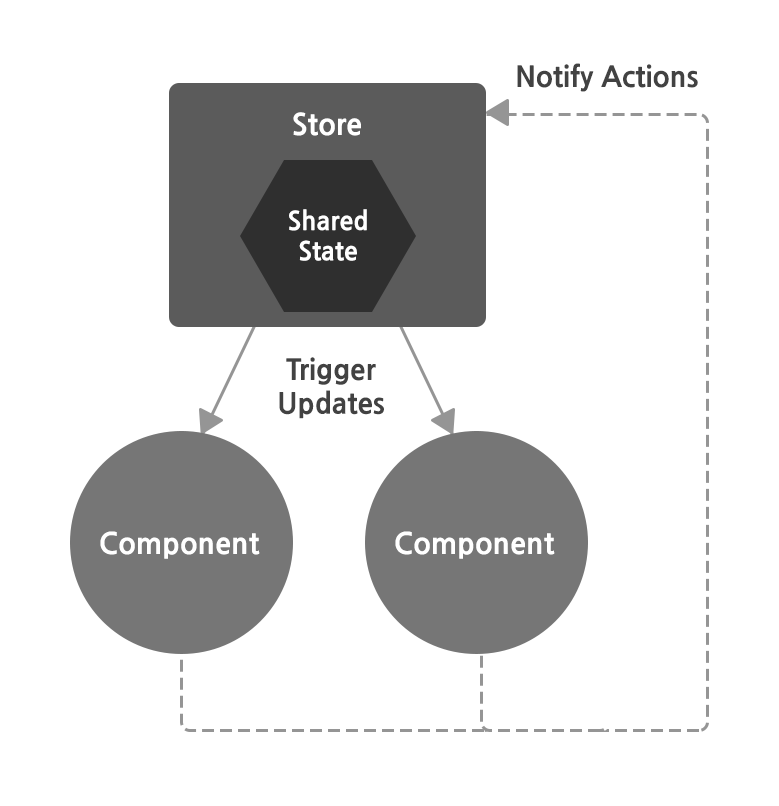
<style>
.page{position:relative;width:779px;height:806px;background:#ffffff}
.page>*{position:absolute;margin:0}
.t1{font:28.2px "NanumGothicExtraBold";color:#424242}
.t2{font:29.1px "NanumGothicExtraBold";color:#ffffff}
.t3{font:25.2px "NanumGothicExtraBold";color:#ffffff}
</style>
<div class="page">
<p class="t1" style="left:517px;top:63px;width:181px;height:29px">Notify Actions</p>
<p class="t2" style="left:293px;top:112px;width:68px;height:24px">Store</p>
<p class="t3" style="left:289px;top:209px;width:78px;height:52px;text-align:center">Shared<br>State</p>
<p class="t1" style="left:279px;top:357px;width:105px;height:62px;text-align:center">Trigger<br>Updates</p>
<p class="t2" style="left:100px;top:531px;width:160px;height:28px">Component</p>
<p class="t2" style="left:395px;top:531px;width:160px;height:28px">Component</p>
</div>
